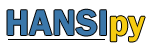
<style>
.page{position:relative;width:149px;height:48px;background:#ffffff}
.page>*{position:absolute;margin:0}
.t1{font:37.3px "FranklinGothic-Demi";color:#3b77aa}
.t2{font:37.3px "FranklinGothic-Demi";color:#f6cc11}
</style>
<div class="page">
<p class="t1" style="left:7px;top:9px;width:138px;height:33px">HANSI<span class="t2">py</span></p>
</div>
